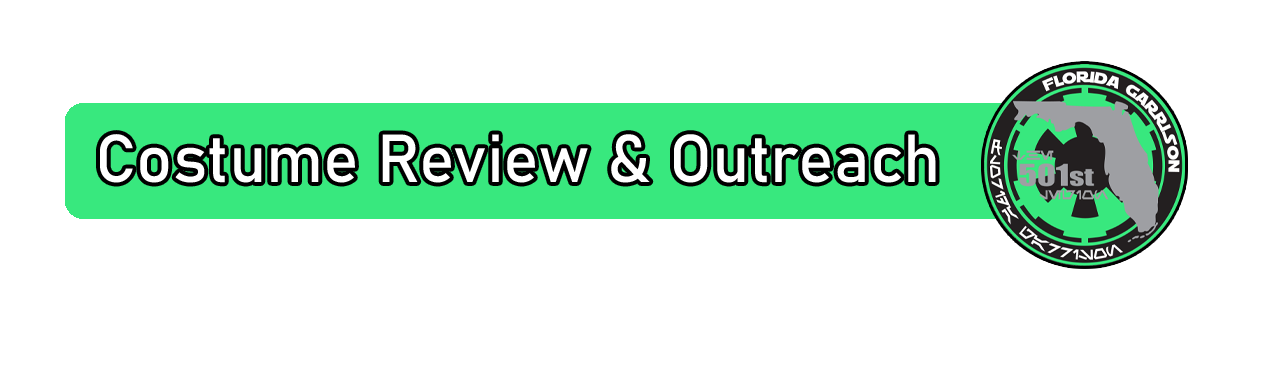
<style>
.page{position:relative;width:1274px;height:368px;background:#ffffff}
.page>*{position:absolute;margin:0}
.t1{font:66.7px "Bahnschrift";color:#ffffff}
</style>
<div class="page">
<p class="t1" style="left:100px;top:134px;width:836px;height:49px">Costume Review &amp; Outreach</p>
</div>
